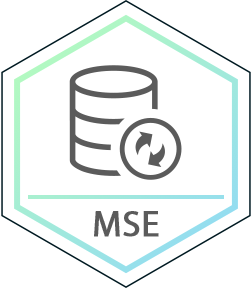
<style>
.page{position:relative;width:252px;height:288px;background:#ffffff}
.page>*{position:absolute;margin:0}
.t1{font:36px "MyriadPro-Regular";color:#5b5b5b;text-transform:uppercase;font-weight:bold}
</style>
<div class="page">
<p class="t1" style="left:94px;top:211px;width:65px;height:26px">MSE</p>
</div>
